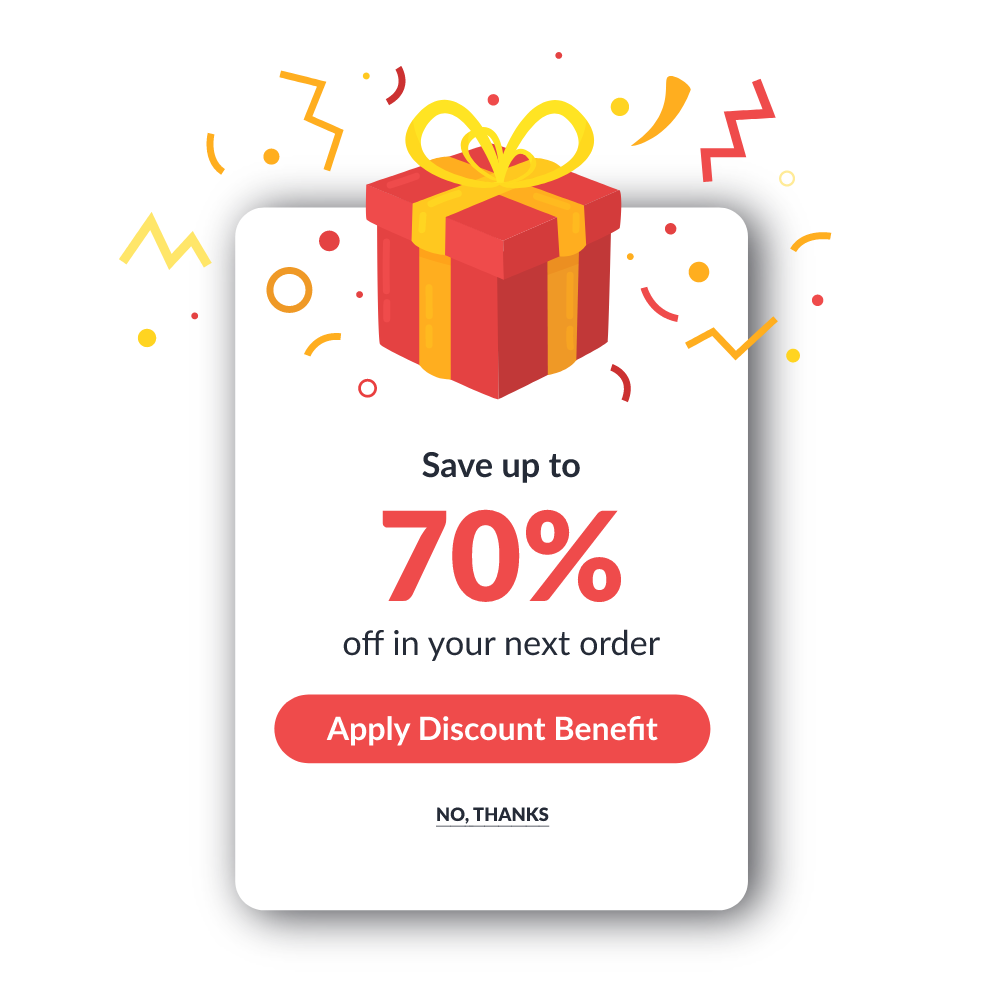
<style>
.page{position:relative;width:1000px;height:1000px;background:#ffffff}
.page>*{position:absolute;margin:0}
.t1{font:34.3px "Lato-Bold";color:#252b37}
.t2{font:124px "Lato-Black";color:#ef4b4b}
.t3{font:34.3px "Lato-Regular";color:#252b37}
.t4{font:32.1px "Lato-Bold";color:#ffffff}
.t5{font:18.4px "Lato-Black";color:#252b37;text-transform:uppercase;text-decoration:underline}
</style>
<div class="page">
<p class="t1" style="left:422px;top:452px;width:158px;height:31px">Save up to</p>
<p class="t2" style="left:382px;top:509px;width:239px;height:93px">70%</p>
<p class="t3" style="left:343px;top:629px;width:317px;height:32px">off in your next order</p>
<p class="t4" style="left:326px;top:716px;width:332px;height:30px">Apply Discount Benefit</p>
<p class="t5" style="left:436px;top:807px;width:114px;height:20px">no, thanks</p>
</div>
